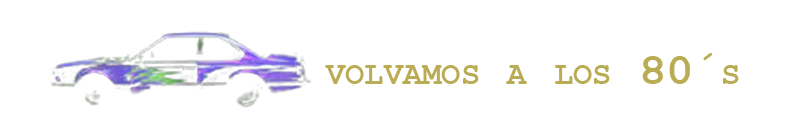
<style>
.page{position:relative;width:800px;height:127px;background:#ffffff}
.page>*{position:absolute;margin:0}
.t1{font:45.7px "CourierNewPS-BoldMT";color:#b9ac55;font-variant:small-caps}
</style>
<div class="page">
<p class="t1" style="left:325px;top:53px;width:414px;height:31px">volvamos a los 80´s</p>
</div>
